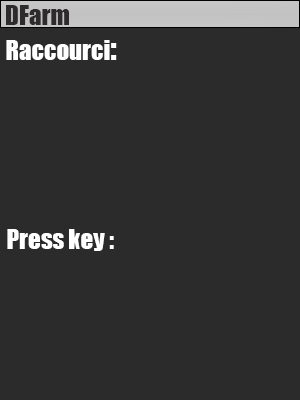
<style>
.page{position:relative;width:300px;height:400px;background:#2b2b2b}
.page>*{position:absolute;margin:0}
.t1{font:25px "Impact";color:#ffffff}
.t2{font:33.3px "Impact";color:#ffffff}
</style>
<div class="page">
<p class="t1" style="left:6px;top:40px;width:111px;height:20px">Raccourci<span class="t2">:</span></p>
<p class="t1" style="left:7px;top:229px;width:107px;height:22px">Press key :</p>
</div>
